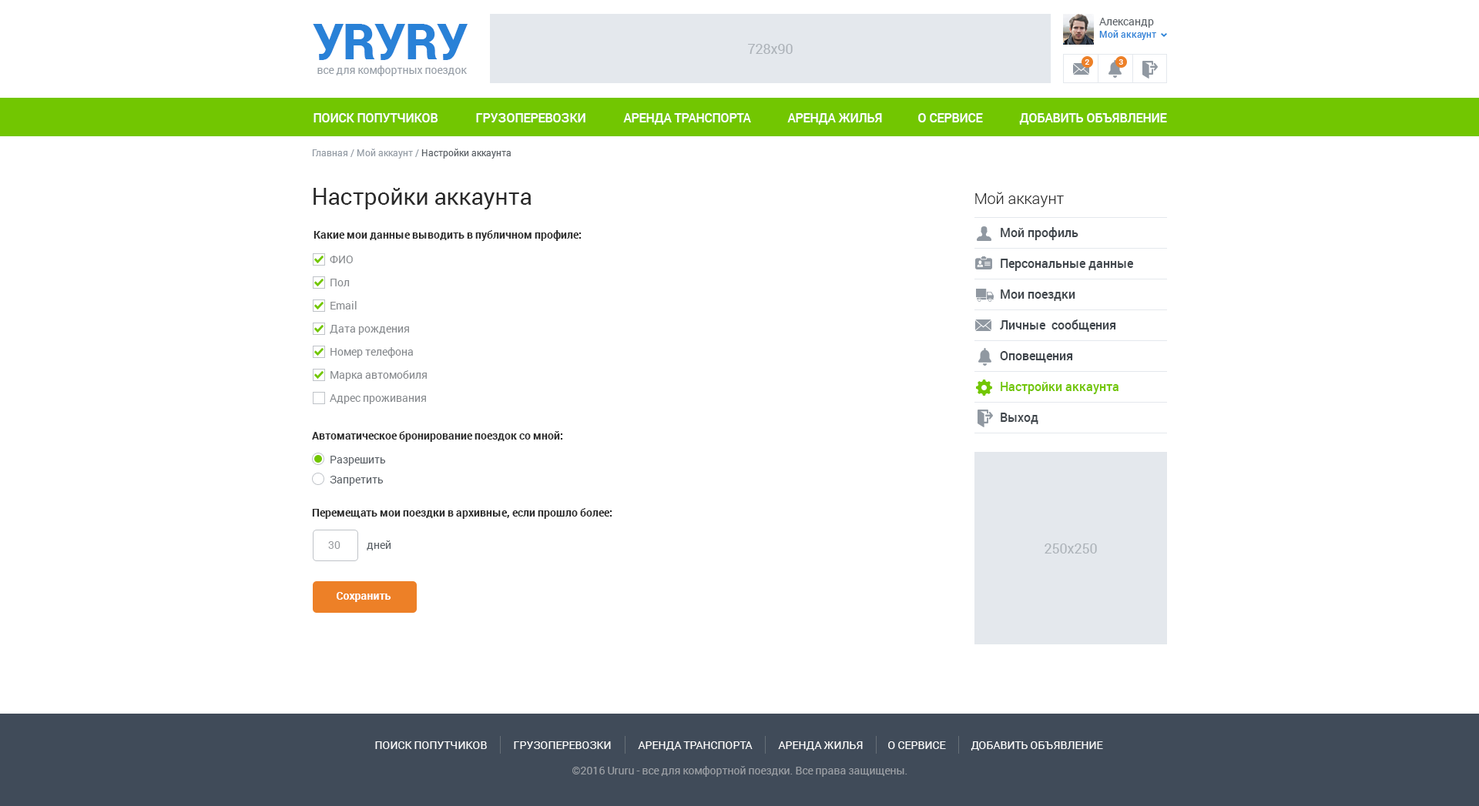
<style>
.page{position:relative;width:1479px;height:806px;background:#ffffff}
.page>*{position:absolute;margin:0}
.t1{font:10.8px "Roboto-Regular";color:#585e64}
.t2{font:49.3px "Roboto-Black";letter-spacing:-0.01em;color:#2981d7}
.t3{font:9.2px "Roboto-Medium";color:#2981d7}
.t4{font:13.9px "Roboto-Regular";color:#acb2b8}
.t5{font:10.8px "Roboto-Regular";color:#949ca5}
.t6{font:7.7px "Roboto-Medium";color:#ffffff}
.t7{font:12.3px "Roboto-Medium";color:#ffffff;text-transform:uppercase}
.t8{font:9.2px "Roboto-Regular";color:#949ca5}
.t9{font:9.2px "Roboto-Regular";color:#585e64}
.t10{font:23.1px "Roboto-Regular";color:#2a2a2a}
.t11{font:15.4px "Roboto-Light";color:#2a2a2a}
.t12{font:10.8px "Roboto-Bold";color:#2a2a2a}
.t13{font:12.3px "Roboto-Medium";color:#3f454b}
.t14{font:10.8px/23.1px "Roboto-Regular";color:#86898d}
.t15{font:12.3px "Roboto-Medium";color:#72c601}
.t16{font:10.8px "Roboto-Regular";color:#989b9e}
.t17{font:10.8px "Roboto-Bold";color:#ffffff}
.t18{font:10.8px "Roboto-Regular";color:#ffffff;text-transform:uppercase}
.t19{font:10.8px "Roboto-Regular";color:#9ca0a6}
</style>
<div class="page">
<p class="t1" style="left:1099px;top:18px;width:55px;height:10px">Александр</p>
<p class="t2" style="left:313px;top:24px;width:155px;height:36px">УRУRУ</p>
<p class="t3" style="left:1099px;top:30px;width:57px;height:10px">Мой аккаунт</p>
<p class="t4" style="left:748px;top:44px;width:45px;height:10px">728x90</p>
<p class="t5" style="left:317px;top:65px;width:150px;height:11px">все для комфортных поездок</p>
<p class="t6" style="left:1084px;top:59px;width:5px;height:6px">2</p>
<p class="t6" style="left:1118px;top:59px;width:5px;height:6px">3</p>
<p class="t7" style="left:313px;top:113px;width:125px;height:9px">Поиск попутчиков</p>
<p class="t7" style="left:476px;top:113px;width:109px;height:9px">грузоперевозки</p>
<p class="t7" style="left:623px;top:113px;width:128px;height:12px">Аренда транспорта</p>
<p class="t7" style="left:787px;top:113px;width:95px;height:12px">Аренда жилья</p>
<p class="t7" style="left:918px;top:113px;width:65px;height:9px">о сервисе</p>
<p class="t7" style="left:1019px;top:113px;width:148px;height:12px">добавить объявление</p>
<p class="t8" style="left:312px;top:149px;width:199px;height:10px">Главная / Мой аккаунт / <span class="t9">Настройки аккаунта</span></p>
<p class="t10" style="left:313px;top:188px;width:218px;height:21px">Настройки аккаунта</p>
<p class="t11" style="left:975px;top:192px;width:89px;height:15px">Мой аккаунт</p>
<p class="t12" style="left:313px;top:230px;width:268px;height:11px">Какие мои данные выводить в публичном профиле:</p>
<p class="t13" style="left:1000px;top:227px;width:78px;height:13px">Мой профиль</p>
<p class="t14" style="left:330px;top:256px;width:97px;height:148px">ФИО<br>Пол<br>Email<br>Дата рождения<br>Номер телефона<br>Марка автомобиля<br>Адрес проживания</p>
<p class="t13" style="left:1000px;top:259px;width:134px;height:12px">Персональные данные</p>
<p class="t13" style="left:1000px;top:290px;width:75px;height:11px">Мои поездки</p>
<p class="t13" style="left:1000px;top:320px;width:116px;height:12px">Личные  сообщения</p>
<p class="t13" style="left:1000px;top:351px;width:73px;height:12px">Оповещения</p>
<p class="t15" style="left:1000px;top:382px;width:118px;height:12px">Настройки аккаунта</p>
<p class="t13" style="left:1000px;top:413px;width:38px;height:11px">Выход</p>
<p class="t12" style="left:312px;top:431px;width:251px;height:11px">Автоматическое бронирование поездок со мной:</p>
<p class="t1" style="left:330px;top:456px;width:56px;height:10px">Разрешить</p>
<p class="t1" style="left:330px;top:476px;width:54px;height:10px">Запретить</p>
<p class="t12" style="left:312px;top:508px;width:300px;height:11px">Перемещать мои поездки в архивные, если прошло более:</p>
<p class="t16" style="left:328px;top:541px;width:12px;height:8px">30</p>
<p class="t1" style="left:367px;top:541px;width:24px;height:10px">дней</p>
<p class="t4" style="left:1044px;top:544px;width:53px;height:10px">250х250</p>
<p class="t17" style="left:337px;top:592px;width:54px;height:10px">Сохранить</p>
<p class="t18" style="left:375px;top:742px;width:112px;height:7px">Поиск попутчиков</p>
<p class="t18" style="left:514px;top:742px;width:97px;height:7px">грузоперевозки</p>
<p class="t18" style="left:638px;top:742px;width:114px;height:9px">Аренда транспорта</p>
<p class="t18" style="left:778px;top:742px;width:85px;height:9px">Аренда жилья</p>
<p class="t18" style="left:888px;top:742px;width:58px;height:7px">о сервисе</p>
<p class="t18" style="left:970px;top:742px;width:133px;height:9px">добавить объявление</p>
<p class="t19" style="left:572px;top:766px;width:335px;height:11px">©2016 Ururu - все для комфортной поездки. Все права защищены.</p>
</div>
